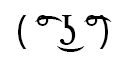
<style>
.page{position:relative;width:128px;height:63px;background:#ffffff}
.page>*{position:absolute;margin:0}
.t1{font:41.7px "TimesNewRomanPSMT";color:#000000}
.t2{font:4.2px "MyriadPro-Regular";color:#000000}
.t3{font:41.7px "MyriadPro-Regular";color:#000000}
</style>
<div class="page">
<p class="t1" style="left:18px;top:15px;width:94px;height:37px"><span class="t2"><br></span><span class="t3">( </span>͡<span class="t3">° </span>͜ʖ ͡<span class="t3">°)</span></p>
</div>
